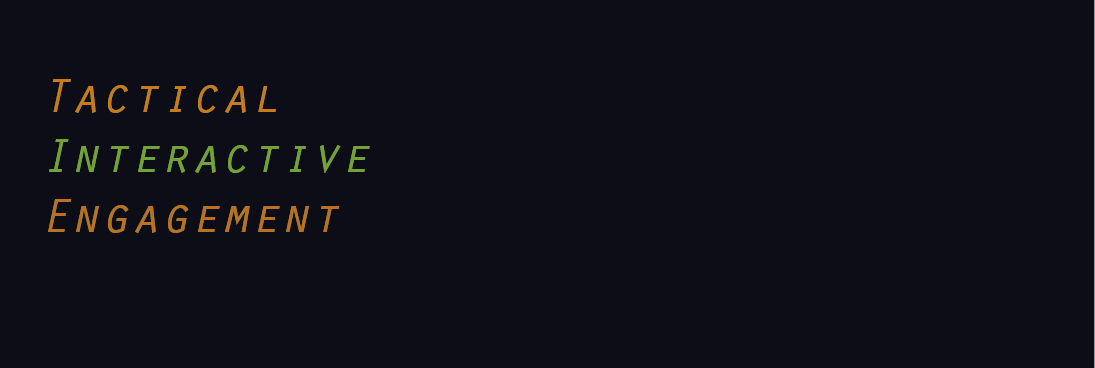
<style>
.page{position:relative;width:1095px;height:368px;background:#0c0d17}
.page>*{position:absolute;margin:0}
.t1{font:50px "OratorStd-Slanted";color:#c97a1c}
.t2{font:50px "OratorStd-Slanted";color:#75a236}
.t3{font:50px "OratorStd-Slanted";color:#bc7021}
</style>
<div class="page">
<p class="t1" style="left:52px;top:79px;width:224px;height:34px">Tactical</p>
<p class="t1" style="left:52px;top:79px;width:224px;height:34px">Tactical</p>
<p class="t2" style="left:49px;top:139px;width:321px;height:34px">Interactive</p>
<p class="t2" style="left:49px;top:139px;width:321px;height:34px">Interactive</p>
<p class="t3" style="left:48px;top:199px;width:292px;height:34px">Engagement</p>
<p class="t3" style="left:48px;top:199px;width:292px;height:34px">Engagement</p>
</div>
